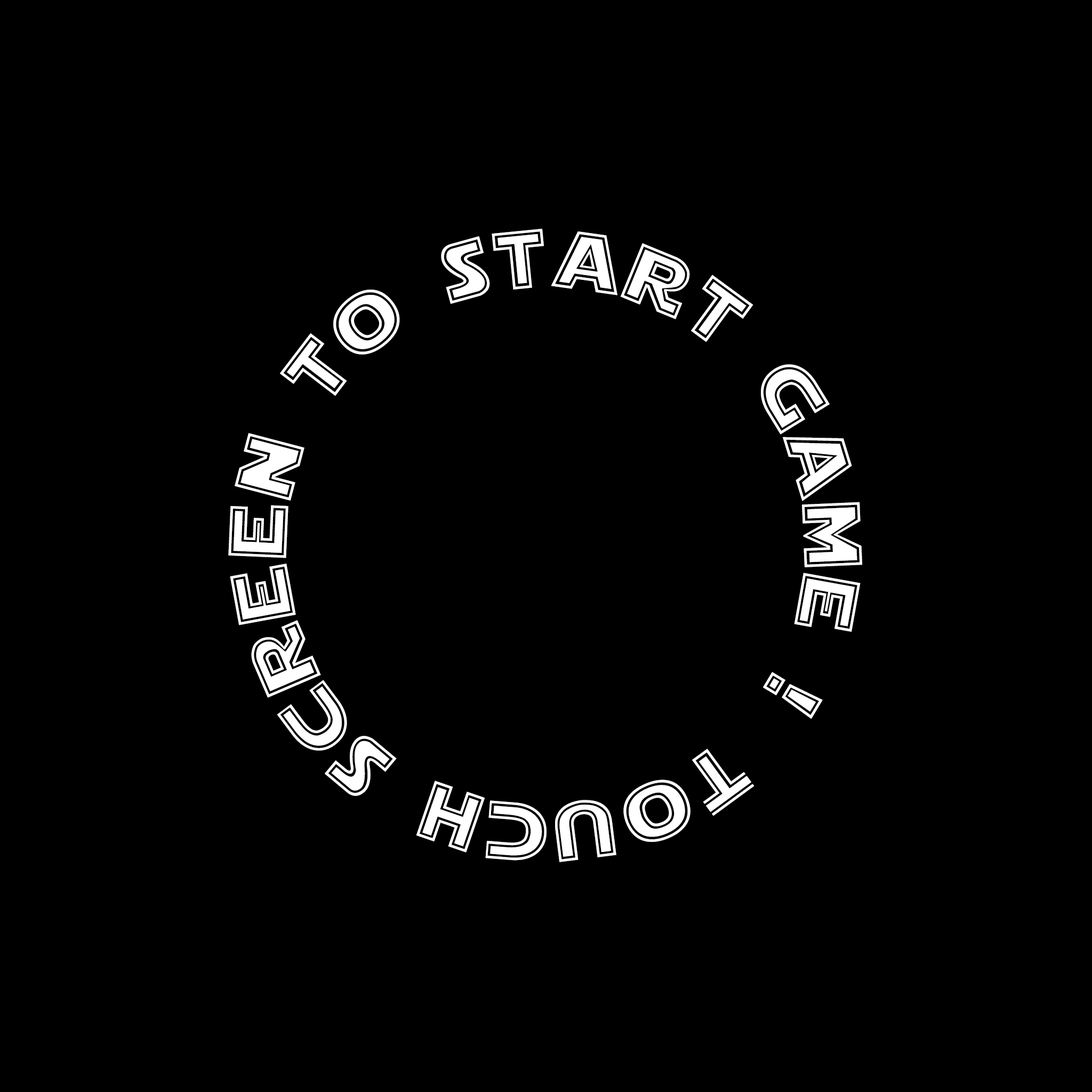
<style>
.page{position:relative;width:1092px;height:1092px;background:#000000}
.page>*{position:absolute;margin:0}
.t1{font:81.6px/21.3px "StarJediOutline";letter-spacing:0.04em;color:#ffffff}
</style>
<div class="page">
<p class="t1" style="left:228px;top:229px;width:634px;height:633px;text-align:center">Touch screen to start game !</p>
</div>
